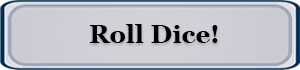
<style>
.page{position:relative;width:300px;height:70px}
.page>*{position:absolute;margin:0}
.t1{font:25.2px "Georgia-Bold";color:#000000}
</style>
<div class="page">
<p class="t1" style="left:89px;top:24px;width:129px;height:19px">Roll Dice!</p>
</div>
